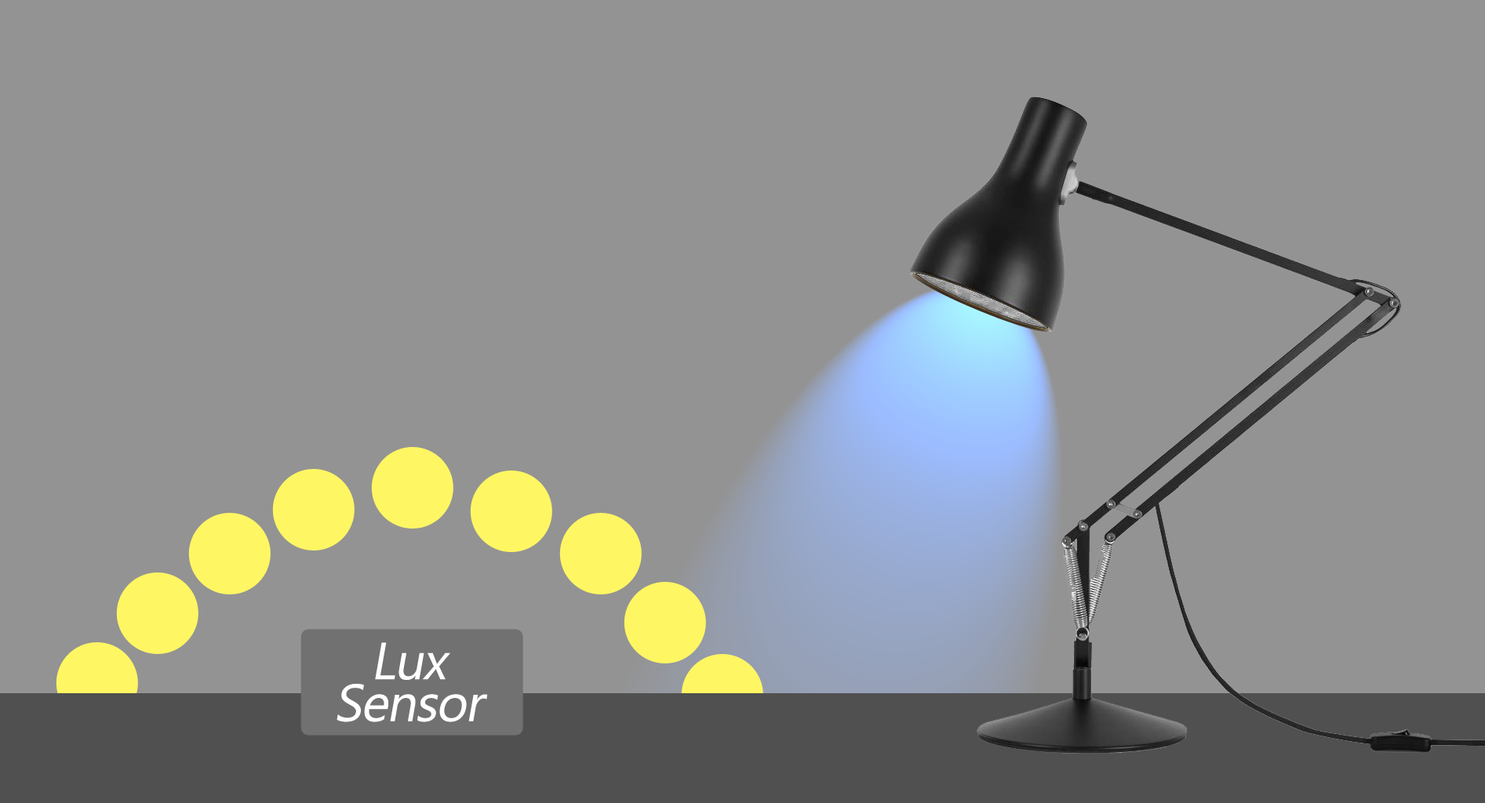
<style>
.page{position:relative;width:1485px;height:803px;background:#939393}
.page>*{position:absolute;margin:0}
.t1{font:52.3px/41.8px "Gadugi";letter-spacing:-0.025em;color:#ffffff;font-style:italic}
</style>
<div class="page">
<p class="t1" style="left:336px;top:642px;width:152px;height:80px;text-align:center">Lux<br>Sensor</p>
</div>
